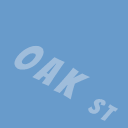
<style>
.page{position:relative;width:128px;height:128px;background:#689bcb}
.page>*{position:absolute;margin:0}
.t1{font:40px "Bangers-Regular";letter-spacing:0.16em;color:#9fbddb}
.t2{font:24px "Bangers-Regular";letter-spacing:0.16em;color:#9fbddb}
</style>
<div class="page">
<p class="t1" style="left:14px;top:45px;width:104px;height:76px;rotate:31deg">OAK <span class="t2">st</span></p>
</div>
